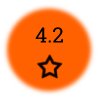
<style>
.page{position:relative;width:100px;height:100px;background:#ff6000}
.page>*{position:absolute;margin:0}
.t1{font:36px "RobotoSlab-Regular";color:#000000}
</style>
<div class="page">
<p class="t1" style="left:35px;top:27px;width:28px;height:16px">4.2</p>
</div>
